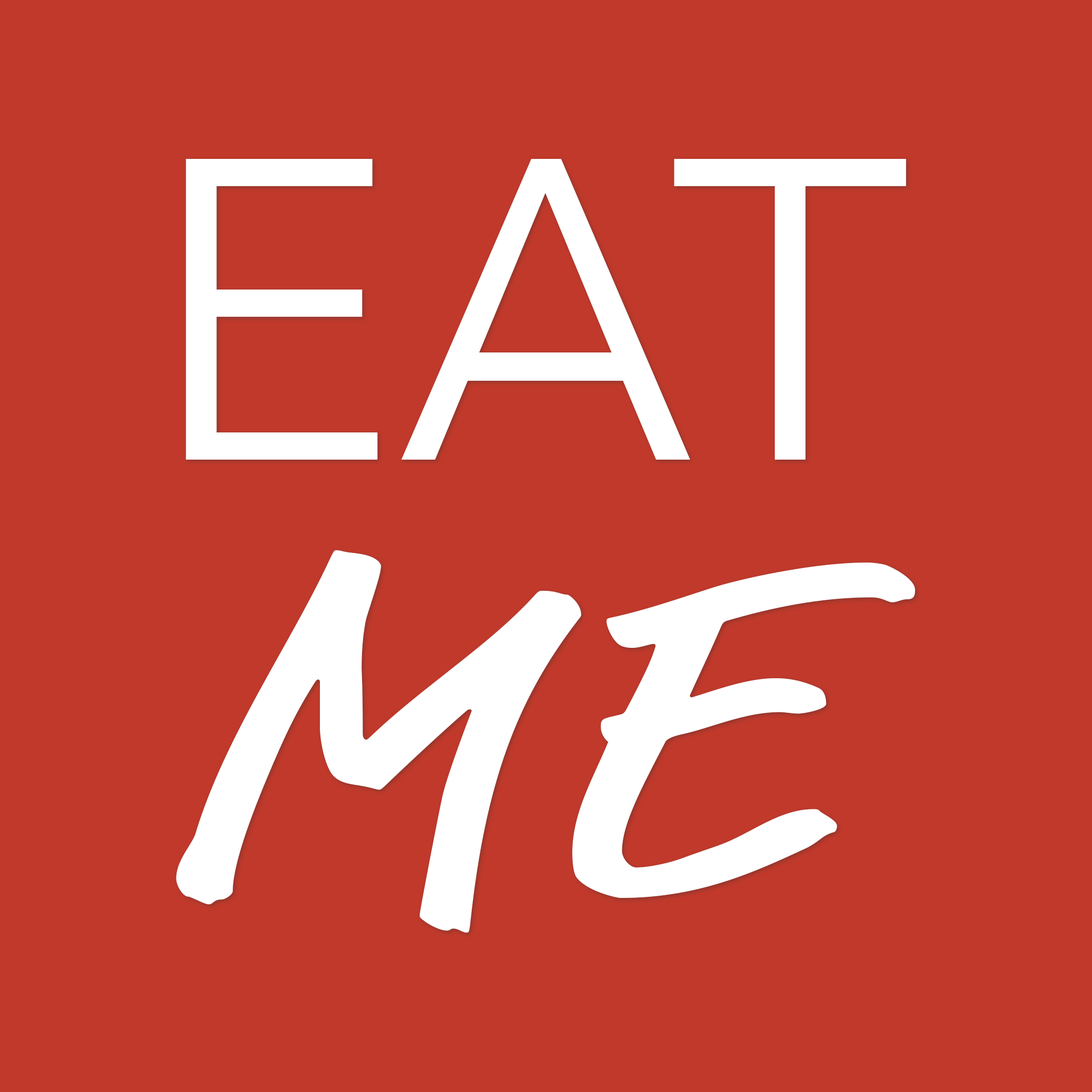
<style>
.page{position:relative;width:1092px;height:1092px;background:#c0392b}
.page>*{position:absolute;margin:0}
.t1{font:424.7px "AvenirNext-Regular";color:#ffffff}
.t2{font:490.4px "MarketOT";color:#ffffff;scale:1.16 1}
</style>
<div class="page">
<p class="t1" style="left:186px;top:159px;width:720px;height:301px">EAT</p>
<p class="t2" style="left:176px;top:550px;width:739px;height:383px">ME</p>
</div>
